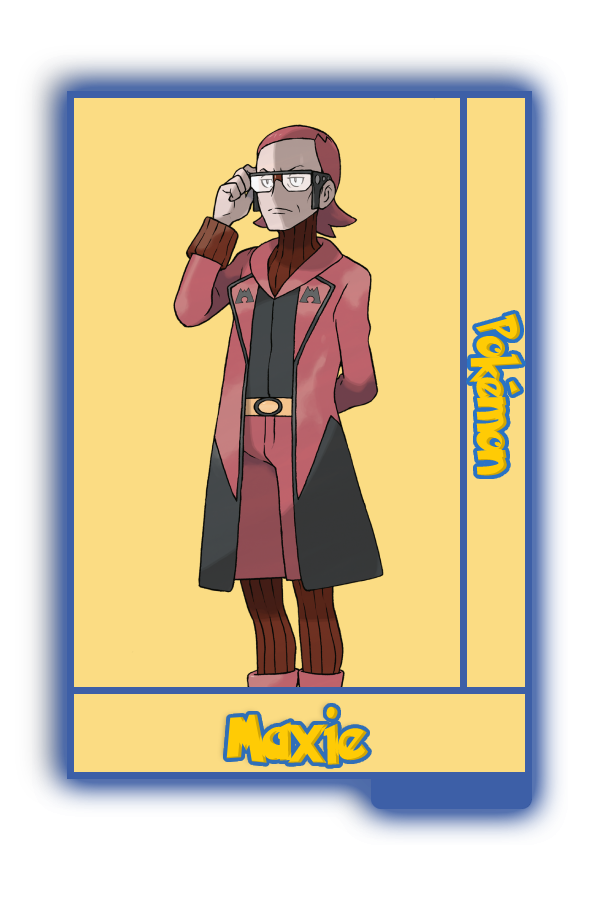
<style>
.page{position:relative;width:600px;height:900px;background:#fbdc83}
.page>*{position:absolute;margin:0}
.t1{font:48.8px "PokemonSolidNormal";color:#ffcb05;scale:0.8 1}
.t2{font:56.6px "PokemonSolidNormal";color:#ffcb05;scale:0.92 1}
</style>
<div class="page">
<p class="t1" style="left:469px;top:313px;width:54px;height:163px;rotate:90deg">Pokémon</p>
<p class="t2" style="left:226px;top:706px;width:142px;height:59px">Maxie</p>
</div>
